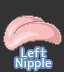
<style>
.page{position:relative;width:64px;height:72px;background:#333333}
.page>*{position:absolute;margin:0}
.t1{font:12px/10px "JK-Gothic-M";color:#c9ffff}
</style>
<div class="page">
<p class="t1" style="left:15px;top:48px;width:36px;height:22px;text-align:center">Left<br>Nipple</p>
</div>
